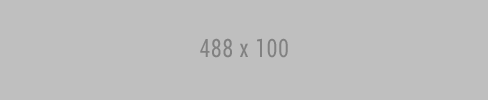
<style>
.page{position:relative;width:488px;height:100px;background:#bfbfbf}
.page>*{position:absolute;margin:0}
.t1{font:25px "Roboto-Condensed";letter-spacing:0.07em;color:#818181;scale:0.8 1}
</style>
<div class="page">
<p class="t1" style="left:200px;top:38px;width:88px;height:20px">488 x 100</p>
</div>
